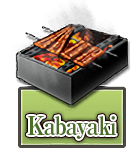
<style>
.page{position:relative;width:138px;height:148px;background:#ffffff}
.page>*{position:absolute;margin:0}
.t1{font:25px "RyuminPro-ExBold";letter-spacing:-0.08em;color:#4c6d28;scale:0.9 1}
</style>
<div class="page">
<p class="t1" style="left:27px;top:116px;width:89px;height:23px">Kabayaki</p>
</div>
